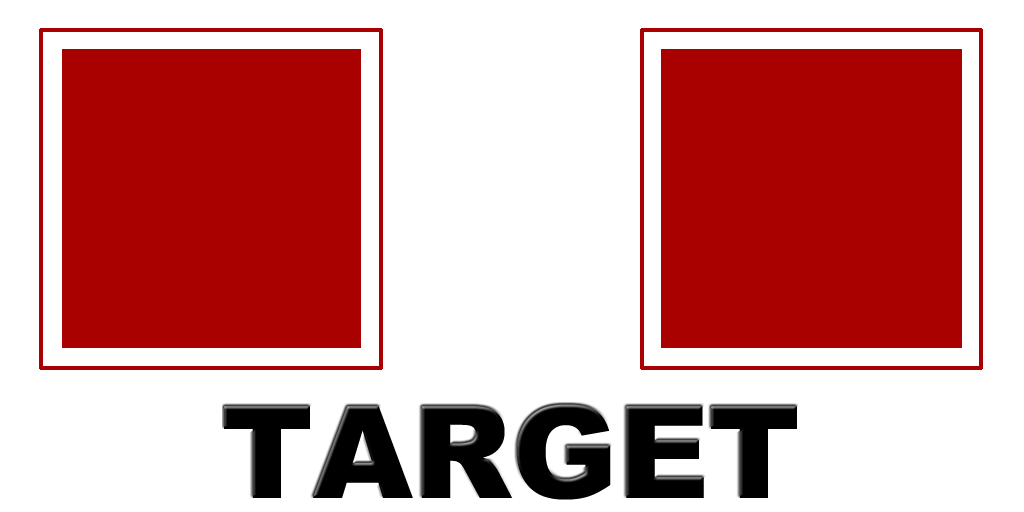
<style>
.page{position:relative;width:1024px;height:512px;background:#ffffff}
.page>*{position:absolute;margin:0}
.t1{font:128px "Arial-Black";letter-spacing:-0.005em;color:#000000}
</style>
<div class="page">
<p class="t1" style="left:224px;top:404px;width:573px;height:96px">TARGET</p>
</div>
